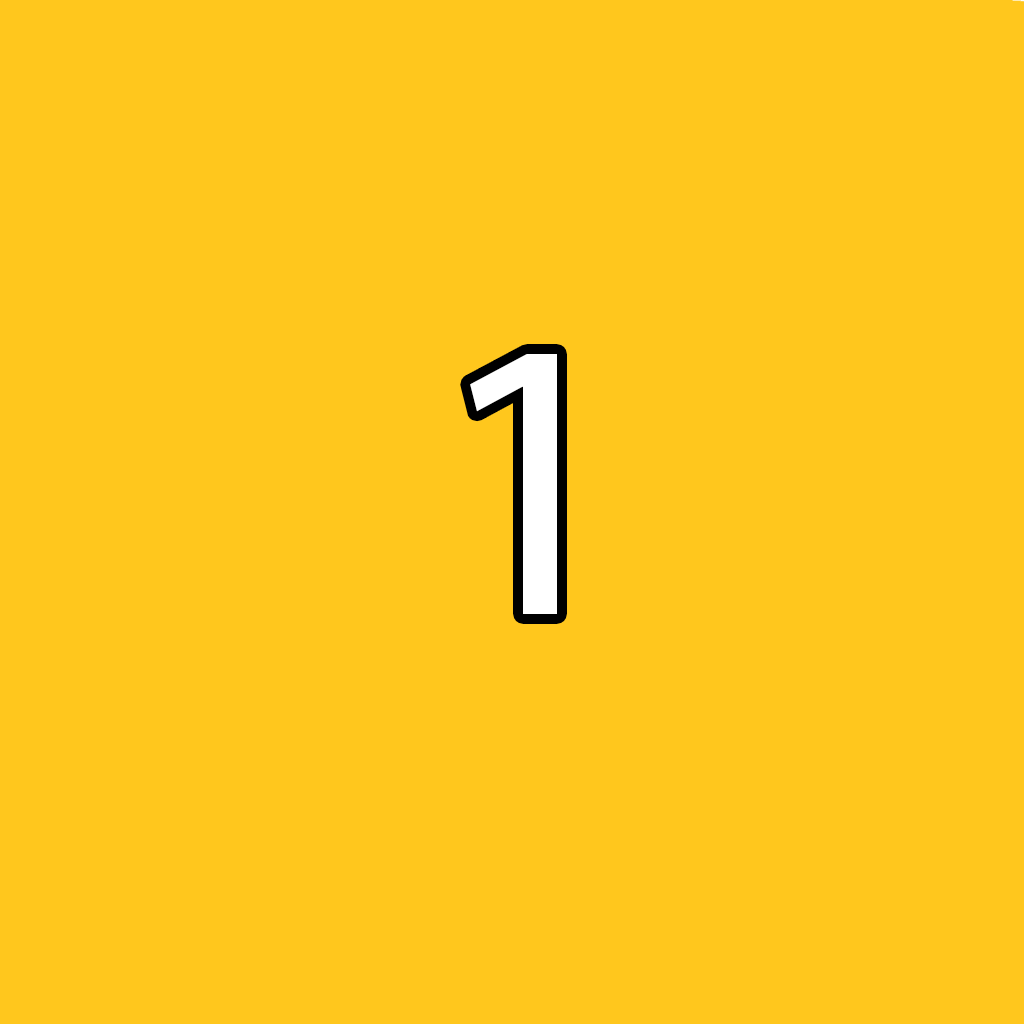
<style>
.page{position:relative;width:1024px;height:1024px;background:#ffc71d}
.page>*{position:absolute;margin:0}
.t1{font:400px "MyriadPro-Regular";color:#ffffff}
</style>
<div class="page">
<p class="t1" style="left:470px;top:354px;width:87px;height:260px">1</p>
</div>
